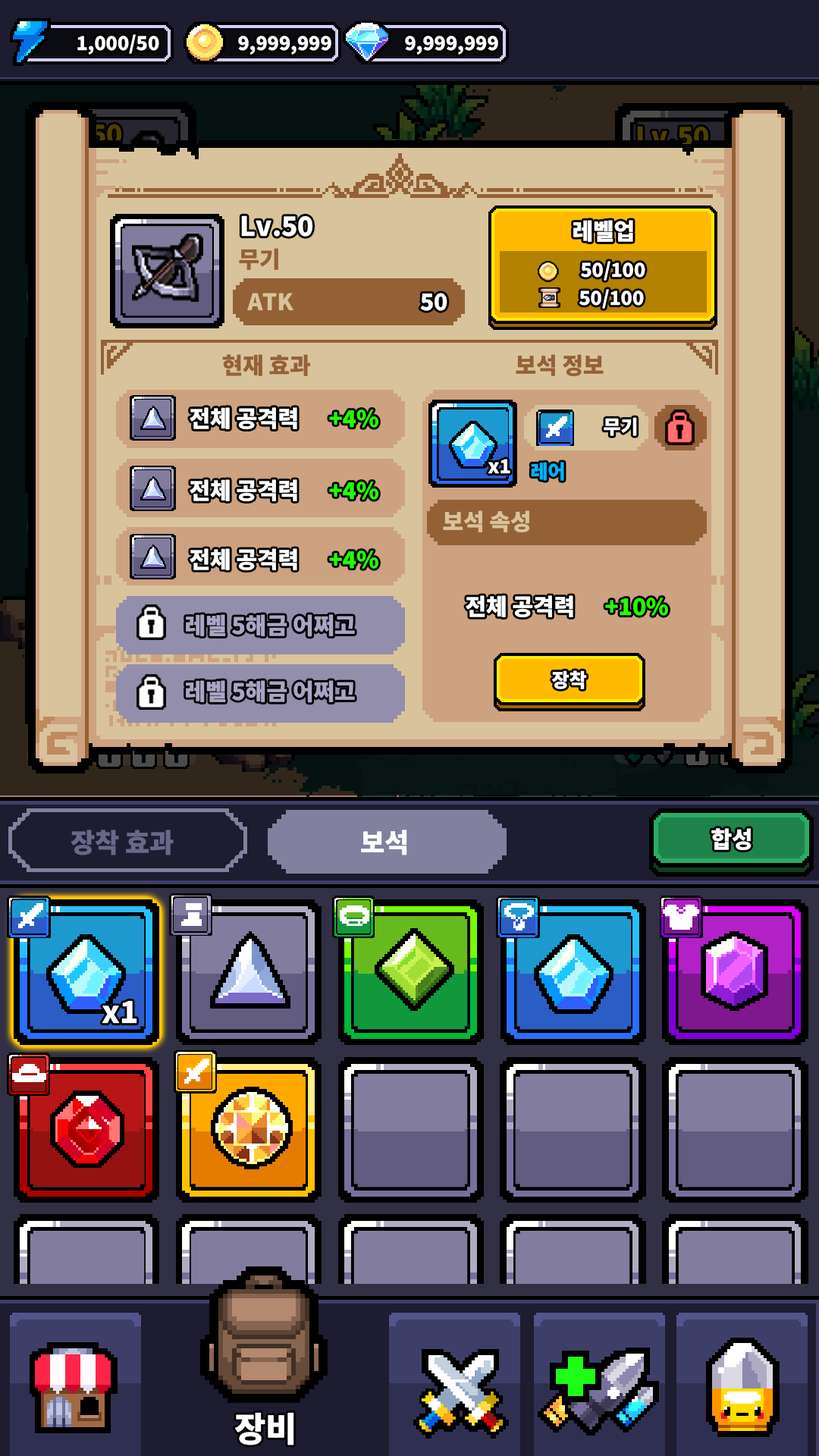
<style>
.page{position:relative;width:819px;height:1456px}
.page>*{position:absolute;margin:0}
.t1{font:19px "NotoSansKR-Black";color:#ffffff}
.t2{font:26.5px "NotoSansKR-Black"}
.t3{font:26.5px "NotoSansKR-Black";color:#ffffff}
.t4{font:22.7px "NotoSansKR-Black";color:#ffffff}
.t5{font:22.7px "NotoSansKR-Black";color:#946136}
.t6{font:22.7px "NotoSansKR-Black";color:#d9c39c}
.t7{font:22.7px "NotoSansKR-Black";color:#24ff00}
.t8{font:19px "NotoSansKR-Black";color:#00b4ff}
.t9{font:22.7px "NotoSansKR-Black";color:#a9a5c5}
.t10{font:26.5px "NotoSansKR-Black";color:#686889}
.t11{font:30.3px "NotoSansKR-Black";color:#ffffff}
.t12{font:34.1px "NotoSansKR-Black";color:#ffffff}
</style>
<div class="page">
<p class="t1" style="left:77px;top:34px;width:82px;height:21px">1,000/50</p>
<p class="t1" style="left:238px;top:36px;width:93px;height:19px">9,999,999</p>
<p class="t1" style="left:405px;top:36px;width:93px;height:19px">9,999,999</p>
<p class="t2" style="left:637px;top:126px;width:72px;height:21px">Lv.50</p>
<p class="t3" style="left:241px;top:215px;width:72px;height:22px">Lv.50</p>
<p class="t4" style="left:573px;top:220px;width:60px;height:22px">레벨업</p>
<p class="t5" style="left:239px;top:248px;width:39px;height:22px">무기</p>
<p class="t1" style="left:581px;top:261px;width:64px;height:20px">50/100</p>
<p class="t6" style="left:247px;top:293px;width:46px;height:18px">ATK</p>
<p class="t4" style="left:420px;top:293px;width:27px;height:18px">50</p>
<p class="t1" style="left:579px;top:289px;width:65px;height:20px">50/100</p>
<p class="t5" style="left:222px;top:354px;width:89px;height:22px">현재 효과</p>
<p class="t5" style="left:516px;top:354px;width:88px;height:23px">보석 정보</p>
<p class="t4" style="left:190px;top:407px;width:107px;height:23px">전체 공격력</p>
<p class="t4" style="left:190px;top:407px;width:107px;height:23px">전체 공격력</p>
<p class="t7" style="left:329px;top:409px;width:49px;height:19px">+4%</p>
<p class="t1" style="left:604px;top:417px;width:33px;height:19px">무기</p>
<p class="t1" style="left:488px;top:459px;width:22px;height:15px">x1</p>
<p class="t8" style="left:531px;top:462px;width:33px;height:19px">레어</p>
<p class="t4" style="left:190px;top:479px;width:107px;height:23px">전체 공격력</p>
<p class="t7" style="left:329px;top:482px;width:49px;height:18px">+4%</p>
<p class="t6" style="left:443px;top:510px;width:87px;height:23px">보석 속성</p>
<p class="t4" style="left:190px;top:548px;width:107px;height:23px">전체 공격력</p>
<p class="t7" style="left:329px;top:551px;width:49px;height:18px">+4%</p>
<p class="t4" style="left:466px;top:595px;width:107px;height:23px">전체 공격력</p>
<p class="t7" style="left:605px;top:598px;width:63px;height:18px">+10%</p>
<p class="t9" style="left:186px;top:614px;width:169px;height:23px">레벨 5해금 어쩌고</p>
<p class="t1" style="left:552px;top:670px;width:35px;height:19px">장착</p>
<p class="t9" style="left:186px;top:680px;width:169px;height:23px">레벨 5해금 어쩌고</p>
<p class="t10" style="left:71px;top:830px;width:103px;height:25px">장착 효과</p>
<p class="t3" style="left:361px;top:830px;width:46px;height:25px">보석</p>
<p class="t4" style="left:711px;top:828px;width:40px;height:23px">합성</p>
<p class="t11" style="left:102px;top:1000px;width:35px;height:24px">x1</p>
<p class="t12" style="left:234px;top:1412px;width:60px;height:33px">장비</p>
</div>
